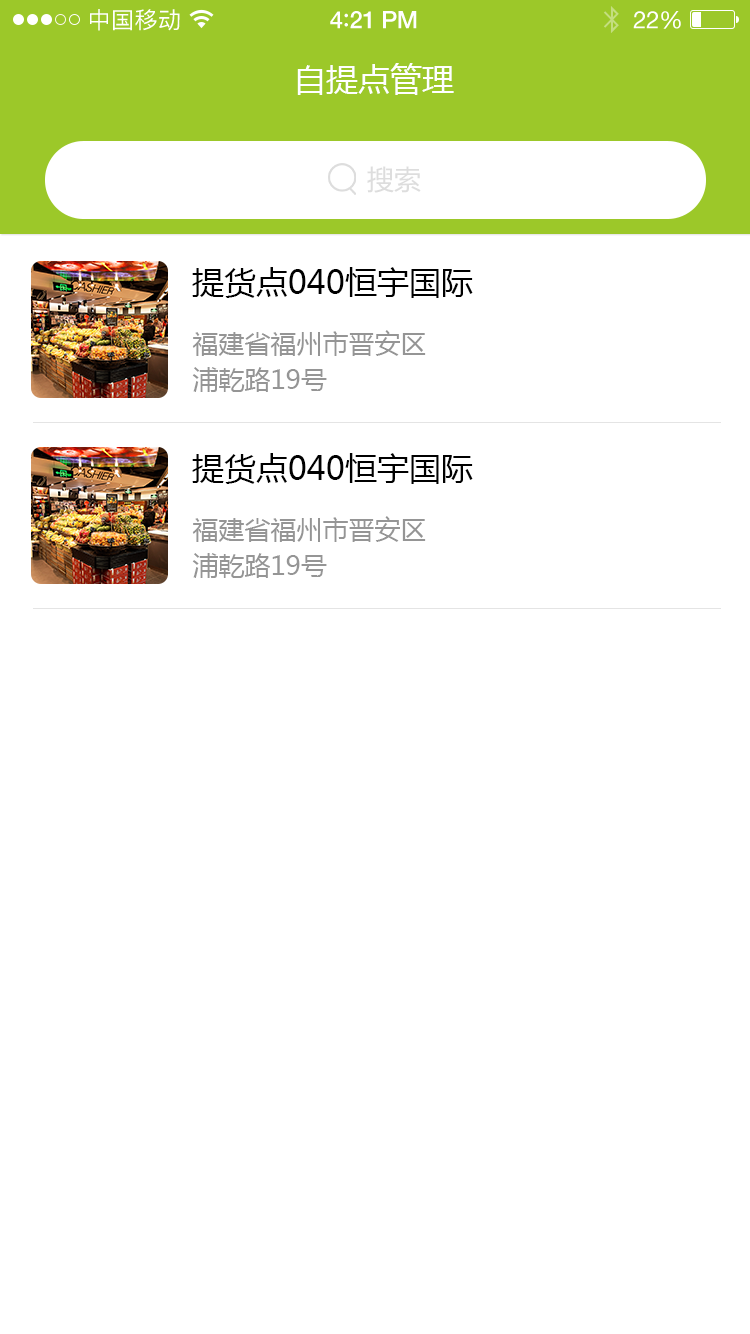
<style>
.page{position:relative;width:750px;height:1334px;background:#ffffff}
.page>*{position:absolute;margin:0}
.t1{font:23px "PingFangSC-Regular";letter-spacing:0.02em;color:#ffffff}
.t2{font:24px "HelveticaNeue-Medium";letter-spacing:-0.02em;color:#ffffff}
.t3{font:26px "Avenir-Medium";letter-spacing:-0.02em;color:#ffffff}
.t4{font:24px "HelveticaNeue";letter-spacing:-0.02em;color:#ffffff}
.t5{font:32px "MicrosoftYaHei";color:#ffffff;text-transform:uppercase}
.t6{font:26.9px "MicrosoftYaHei";color:#dddddd;text-transform:uppercase}
.t7{font:32px "MicrosoftYaHei";color:#000000;text-transform:uppercase}
.t8{font:26px/36px "MicrosoftYaHei";color:#959595;text-transform:uppercase}
</style>
<div class="page">
<p class="t1" style="left:90px;top:9px;width:90px;height:22px">中国移动</p>
<p class="t2" style="left:330px;top:11px;width:87px;height:18px">4<span class="t3">:</span>21 PM</p>
<p class="t4" style="left:633px;top:11px;width:48px;height:18px">22%</p>
<p class="t5" style="left:297px;top:63px;width:157px;height:32px">自提点管理</p>
<p class="t6" style="left:367px;top:166px;width:54px;height:27px">搜索</p>
<p class="t7" style="left:192px;top:267px;width:281px;height:31px">提货点040恒宇国际</p>
<p class="t8" style="left:192px;top:330px;width:234px;height:62px">福建省福州市晋安区<br>浦乾路19号</p>
<p class="t7" style="left:192px;top:453px;width:281px;height:31px">提货点040恒宇国际</p>
<p class="t8" style="left:192px;top:516px;width:234px;height:62px">福建省福州市晋安区<br>浦乾路19号</p>
</div>
